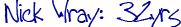
<style>
.page{position:relative;width:181px;height:27px;background:#ffffff}
.page>*{position:absolute;margin:0}
.t1{font:36px "TallPaul";color:#000099}
</style>
<div class="page">
<p class="t1" style="left:4px;top:0px;width:177px;height:29px">Nick Wray: 32yrs</p>
</div>
